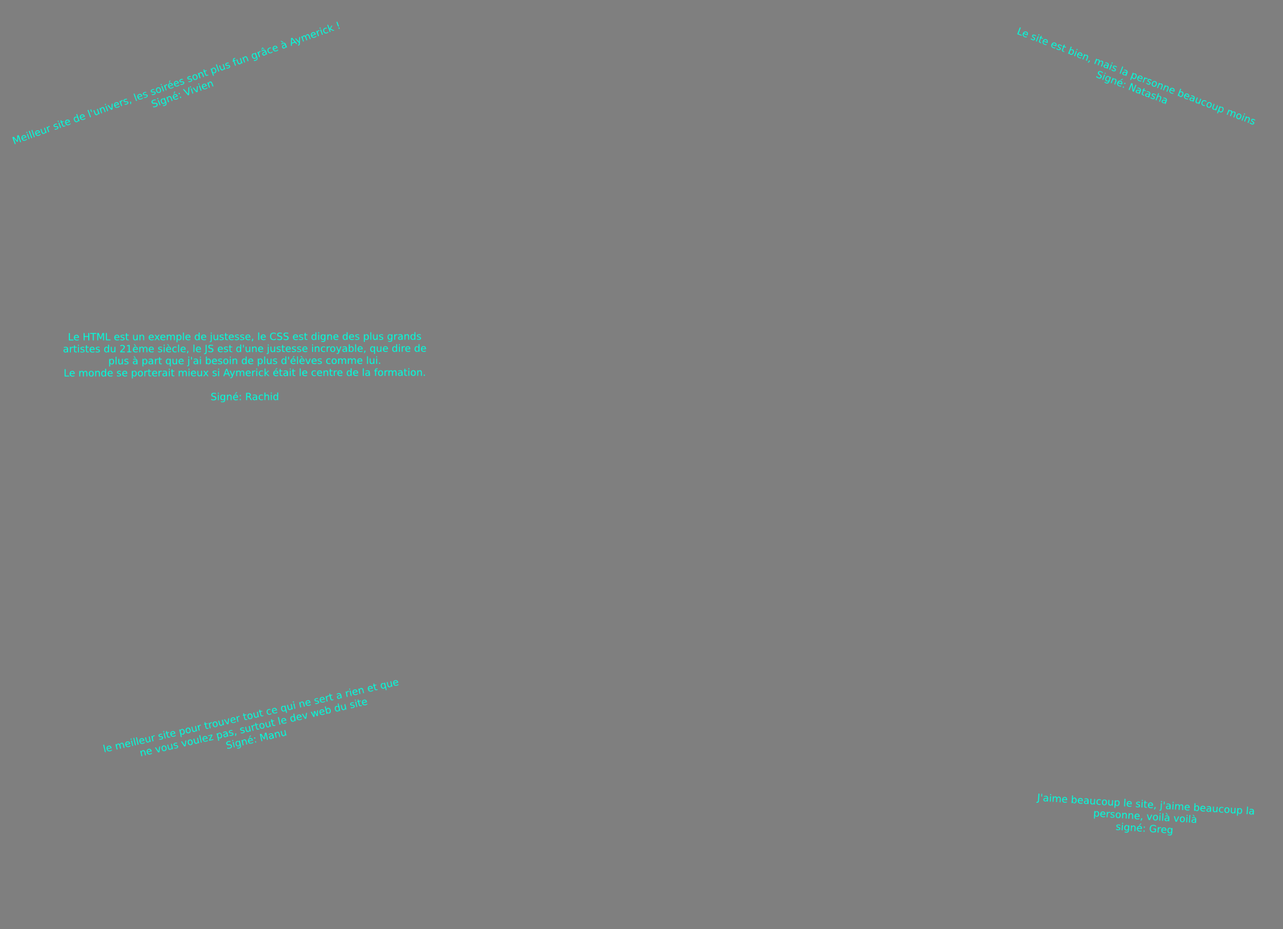
<style>
.page{position:relative;width:1283px;height:929px;background:#7f7f7f}
.page>*{position:absolute;margin:0}
.t1{font:10px "DejaVuSans";color:#00ffde}
</style>
<div class="page">
<p class="t1" style="left:12px;top:21px;width:328px;height:123px;rotate:-20deg">Meilleur site de l'univers, les soirées sont plus fun grâce à Aymerick !<br>Signé: Vivien</p>
<p class="t1" style="left:1017px;top:27px;width:239px;height:98px;text-align:center;rotate:21deg">Le site est bien, mais la personne beaucoup moins<br>Signé: Natasha</p>
<p class="t1" style="left:63px;top:332px;width:363px;height:71px;text-align:center">Le HTML est un exemple de justesse, le CSS est digne des plus grands artistes du 21ème siècle, le JS est d'une justesse incroyable, que dire de plus à part que j'ai besoin de plus d'élèves comme lui.<br>Le monde se porterait mieux si Aymerick était le centre de la formation.<br><br>Signé: Rachid</p>
<p class="t1" style="left:103px;top:680px;width:296px;height:77px;text-align:center;rotate:-13deg">le meilleur site pour trouver tout ce qui ne sert a rien et que ne vous voulez pas, surtout le dev web du site<br>Signé: Manu</p>
<p class="t1" style="left:1036px;top:794px;width:218px;height:42px;text-align:center;rotate:4deg">J'aime beaucoup le site, j'aime beaucoup la personne, voilà voilà<br>signé: Greg</p>
</div>
